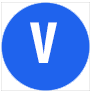
<style>
.page{position:relative;width:92px;height:92px;background:#1f63ed}
.page>*{position:absolute;margin:0}
.t1{font:60px "MyriadPro-BoldCond";color:#ffffff}
</style>
<div class="page">
<p class="t1" style="left:30px;top:22px;width:27px;height:41px">V</p>
</div>
